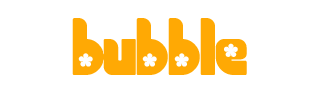
<style>
.page{position:relative;width:320px;height:100px;background:#ffffff}
.page>*{position:absolute;margin:0}
.t1{font:72px "Chick";color:#ffa904}
</style>
<div class="page">
<p class="t1" style="left:72px;top:18px;width:175px;height:57px">bubble</p>
</div>
